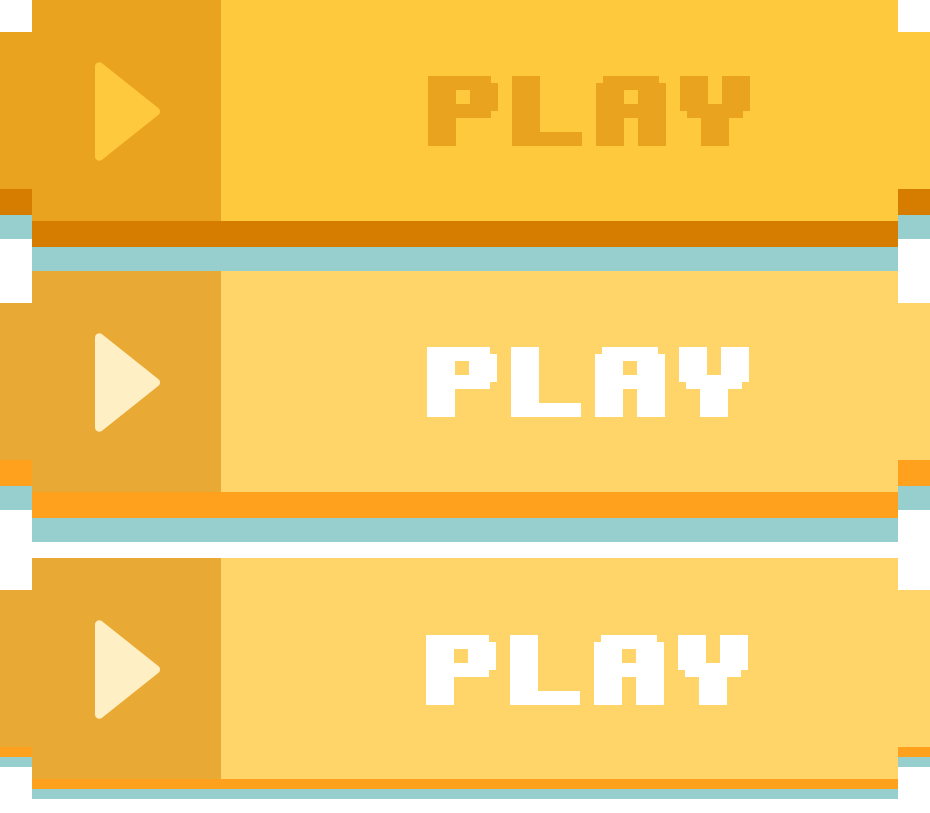
<style>
.page{position:relative;width:930px;height:813px;background:#ffd569}
.page>*{position:absolute;margin:0}
.t1{font:84px "8BITWONDERNominal";color:#eaa31e}
.t2{font:84px "8BITWONDERNominal";color:#ffffff}
</style>
<div class="page">
<p class="t1" style="left:428px;top:76px;width:322px;height:70px">PLAY</p>
<p class="t2" style="left:427px;top:347px;width:322px;height:70px">PLAY</p>
<p class="t2" style="left:426px;top:635px;width:322px;height:70px">PLAY</p>
</div>
